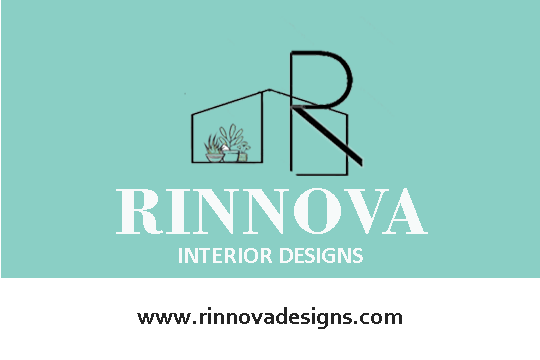
<style>
.page{position:relative;width:540px;height:360px;background:#8acfc5}
.page>*{position:absolute;margin:0}
.t1{font:70px "BodoniBT-Bold";color:#f7fafa}
.t2{font:24px "Calibri-Bold";color:#f7fafa}
.t3{font:24px "Corbel-Bold";color:#252525}
</style>
<div class="page">
<p class="t1" style="left:116px;top:188px;width:312px;height:46px">RINNOVA</p>
<p class="t2" style="left:179px;top:248px;width:184px;height:15px">INTERIOR DESIGNS</p>
<p class="t3" style="left:137px;top:307px;width:265px;height:22px">www.rinnovadesigns.com</p>
</div>
